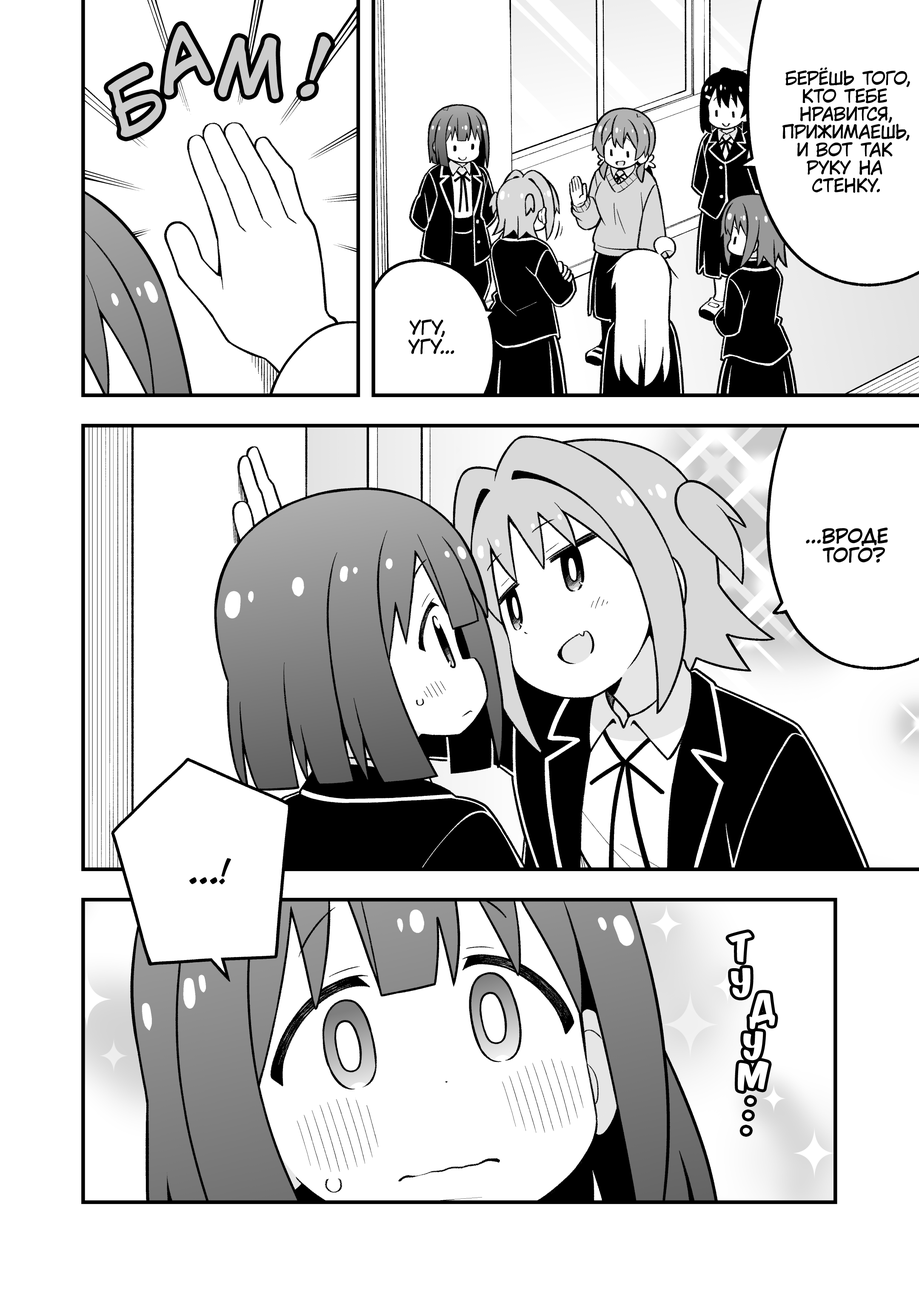
<style>
.page{position:relative;width:919px;height:1298px;background:#ffffff}
.page>*{position:absolute;margin:0}
.t1{font:76.6px "KuraiVoice2";color:#cccccc;text-transform:uppercase}
.t2{font:17.9px "KuraiVoice2";color:#000000;text-transform:uppercase}
.t3{font:19.1px "KuraiVoice2";color:#000000;text-transform:uppercase}
.t4{font:19.1px "KuraiVoice2";color:#000000;text-transform:uppercase;font-weight:bold}
.t5{font:31.9px "v_CCJeffCampbell";color:#000000;text-transform:uppercase}
.t6{font:31.9px "KomikaTitle-AxisRUS-LAT";color:#ffffff;text-transform:uppercase}
</style>
<div class="page">
<p class="t1" style="left:218px;top:37px;width:62px;height:62px;rotate:4deg">м</p>
<p class="t1" style="left:108px;top:66px;width:54px;height:71px;rotate:-16deg">б</p>
<p class="t2" style="left:782px;top:67px;width:128px;height:126px;text-align:center">Берёшь того,<br>кто тебе<br>нравится,<br>прижимаешь,<br>и вот так<br>руку на<br>стенку.</p>
<p class="t3" style="left:408px;top:319px;width:46px;height:35px;text-align:center">Угу,<br>угу...</p>
<p class="t4" style="left:806px;top:527px;width:82px;height:36px;text-align:center">...Вроде<br>того?</p>
<p class="t5" style="left:189px;top:858px;width:42px;height:26px">...!</p>
<p class="t6" style="left:728px;top:932px;width:24px;height:30px;rotate:-9deg">т</p>
<p class="t6" style="left:731px;top:967px;width:19px;height:30px;rotate:-12deg">у</p>
<p class="t6" style="left:749px;top:993px;width:26px;height:36px;rotate:-10deg">д</p>
<p class="t6" style="left:743px;top:1031px;width:20px;height:29px;rotate:-7deg">у</p>
<p class="t6" style="left:738px;top:1061px;width:31px;height:30px;rotate:-4deg">м</p>
<p class="t6" style="left:747px;top:1098px;width:7px;height:6px">.</p>
<p class="t6" style="left:745px;top:1112px;width:7px;height:6px">.</p>
<p class="t6" style="left:742px;top:1127px;width:8px;height:6px">.</p>
</div>
